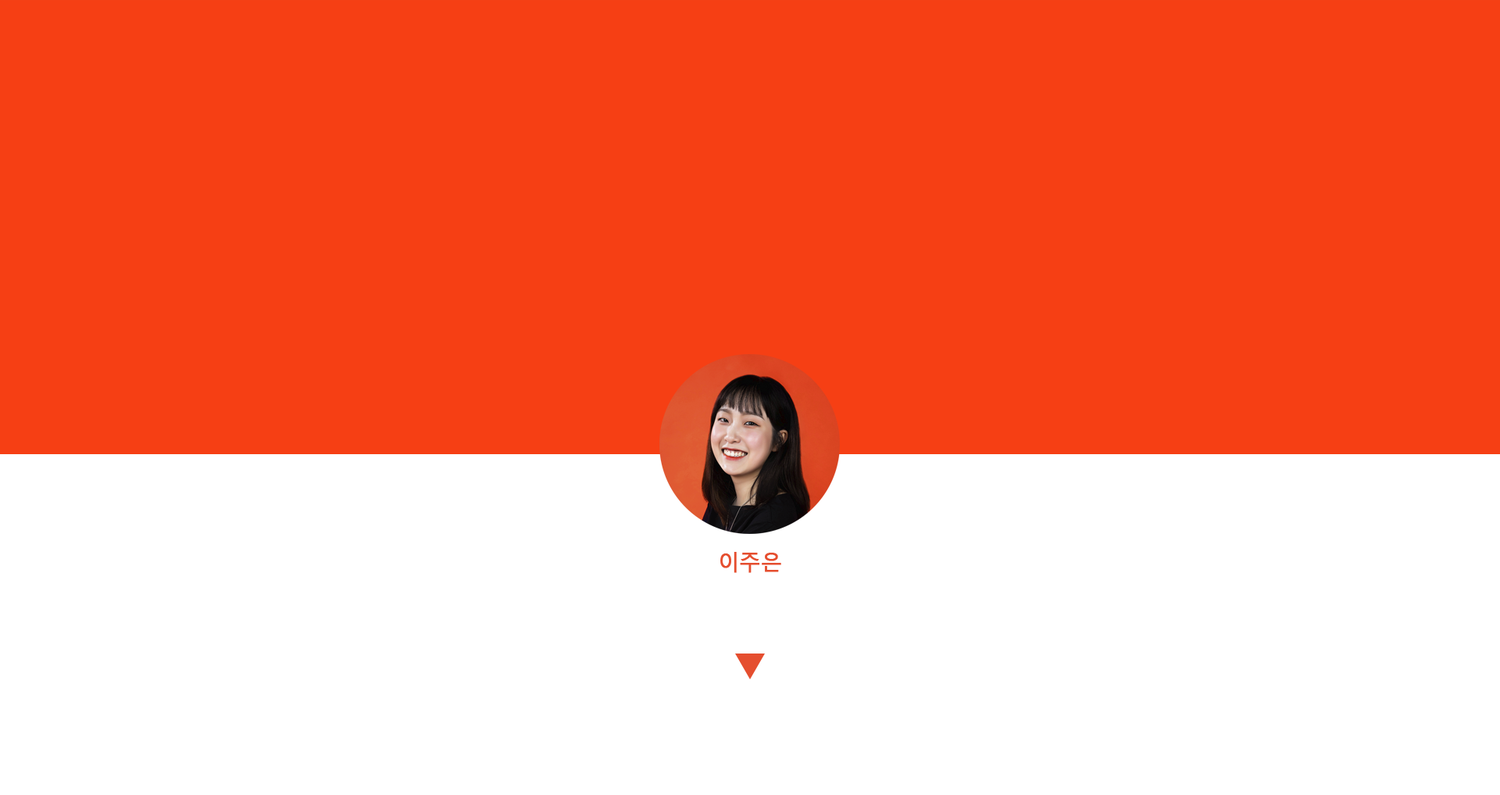
<style>
.page{position:relative;width:1500px;height:795px;background:#f63f14}
.page>*{position:absolute;margin:0}
.t1{font:20.8px "MalgunGothic";color:#e54e2f;font-weight:bold}
</style>
<div class="page">
<p class="t1" style="left:721px;top:552px;width:60px;height:21px">이주은</p>
</div>
